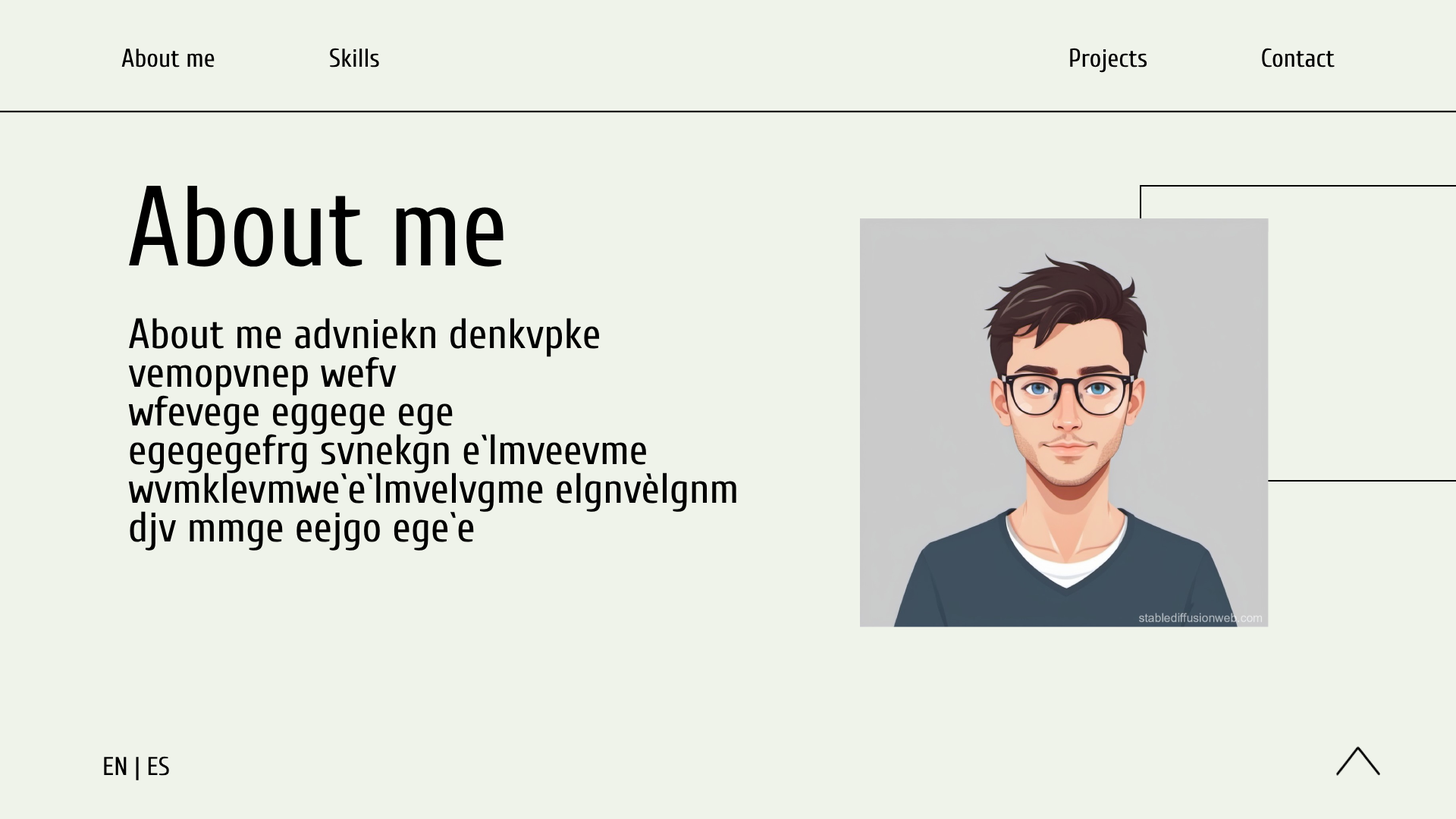
<style>
.page{position:relative;width:1456px;height:819px;background:#eff3ea}
.page>*{position:absolute;margin:0}
.t1{font:25.8px "Cuprum-Regular";color:#000000}
.t2{font:113.7px "Cuprum-Regular";color:#000000;scale:0.92 1}
.t3{font:42.5px/38.7px "Cuprum-Regular";color:#000000}
</style>
<div class="page">
<p class="t1" style="left:121px;top:49px;width:94px;height:18px">About me</p>
<p class="t1" style="left:330px;top:48px;width:49px;height:19px">Skills</p>
<p class="t1" style="left:1070px;top:48px;width:77px;height:25px">Projects</p>
<p class="t1" style="left:1262px;top:48px;width:73px;height:19px">Contact</p>
<p class="t2" style="left:129px;top:186px;width:375px;height:81px">About me</p>
<p class="t3" style="left:128px;top:318px;width:608px;height:233px">About me advniekn denkvpke<br>vemopvnep wefv<br>wfevege eggege ege<br>egegegefrg svnekgn e`lmveevme<br>wvmklevmwe`e`lmvelvgme elgnvèlgnm<br>djv mmge eejgo ege`e</p>
<p class="t1" style="left:104px;top:756px;width:65px;height:24px">EN | ES</p>
</div>
